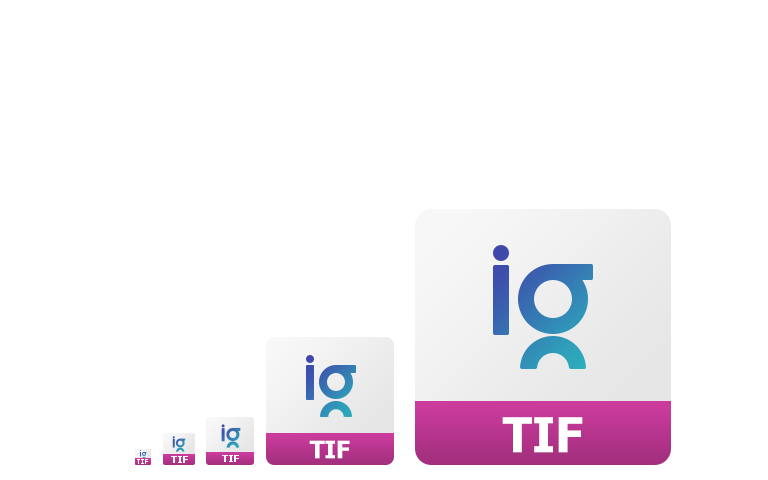
<style>
.page{position:relative;width:768px;height:480px;background:#ffffff}
.page>*{position:absolute;margin:0}
.t1{font:48px "Tahoma-Bold";color:#ffffff}
.t2{font:24px "Tahoma-Bold";color:#ffffff}
.t3{font:10px "Tahoma-Bold";color:#ffffff}
</style>
<div class="page">
<p class="t1" style="left:502px;top:417px;width:81px;height:36px">TIF</p>
<p class="t2" style="left:309px;top:440px;width:41px;height:19px">TIF</p>
<p class="t3" style="left:171px;top:456px;width:17px;height:7px">TIF</p>
<p class="t3" style="left:222px;top:455px;width:17px;height:7px">TIF</p>
</div>
